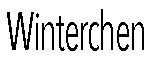
<style>
.page{position:relative;width:150px;height:63px;background:#ffffff}
.page>*{position:absolute;margin:0}
.t1{font:54.2px "AvenirNextCondensed-Regular";letter-spacing:-0.05em;color:#000000;scale:0.72 1}
</style>
<div class="page">
<p class="t1" style="left:7px;top:9px;width:137px;height:42px">Winterchen</p>
</div>
